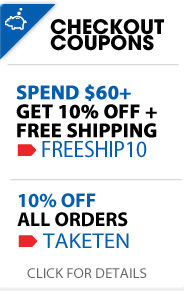
<style>
.page{position:relative;width:184px;height:291px;background:#ffffff}
.page>*{position:absolute;margin:0}
.t1{font:20px "AvantGarde-Bold";color:#000000;text-transform:uppercase}
.t2{font:20px/19px "MyriadPro-Bold";color:#000000;text-transform:uppercase;font-weight:bold}
.t3{font:20px/19px "MyriadPro-Bold";color:#055daf;text-transform:uppercase;font-weight:bold}
.t4{font:23.6px "MyriadPro-Regular";color:#055daf;text-transform:uppercase;scale:0.91 1}
.t5{font:20px/19px "MyriadPro-Bold";color:#000000;text-transform:uppercase}
.t6{font:20px/19px "MyriadPro-Bold";color:#055daf;text-transform:uppercase}
.t7{font:21.6px "MyriadPro-Regular";color:#055daf;text-transform:uppercase;scale:1.06 1}
.t8{font:14px "MyriadPro-Regular";color:#696969;text-transform:uppercase;scale:1.06 1}
</style>
<div class="page">
<p class="t1" style="left:50px;top:19px;width:114px;height:16px">Checkout</p>
<p class="t1" style="left:50px;top:35px;width:104px;height:16px">cOUPONS</p>
<p class="t2" style="left:16px;top:84px;width:141px;height:54px"><span class="t3">Spend $60+<br></span>get 10% OFF +<br>free shipping</p>
<p class="t4" style="left:42px;top:140px;width:105px;height:18px">freeship10</p>
<p class="t5" style="left:17px;top:193px;width:111px;height:34px"><span class="t6">10% OFF <br></span>ALL ORDERS</p>
<p class="t7" style="left:43px;top:233px;width:86px;height:15px">TAKETEN</p>
<p class="t8" style="left:27px;top:268px;width:120px;height:10px">click for details</p>
</div>
